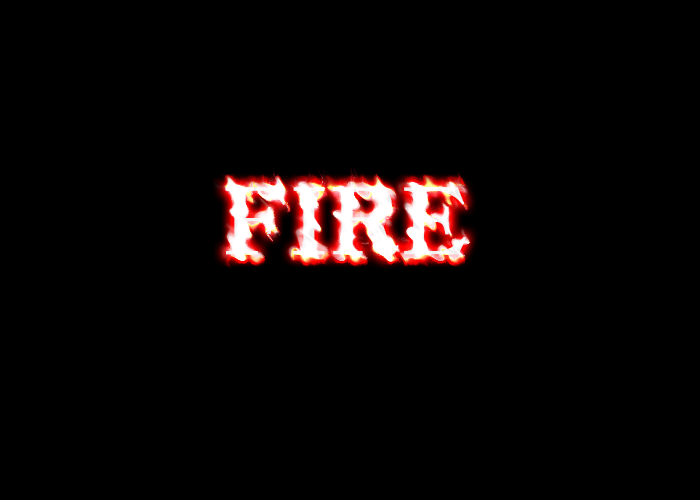
<style>
.page{position:relative;width:700px;height:500px;background:#000000}
.page>*{position:absolute;margin:0}
.t1{font:91px "H2mjrE";color:#ececec}
</style>
<div class="page">
<p class="t1" style="left:225px;top:187px;width:241px;height:70px">FIRE</p>
</div>
